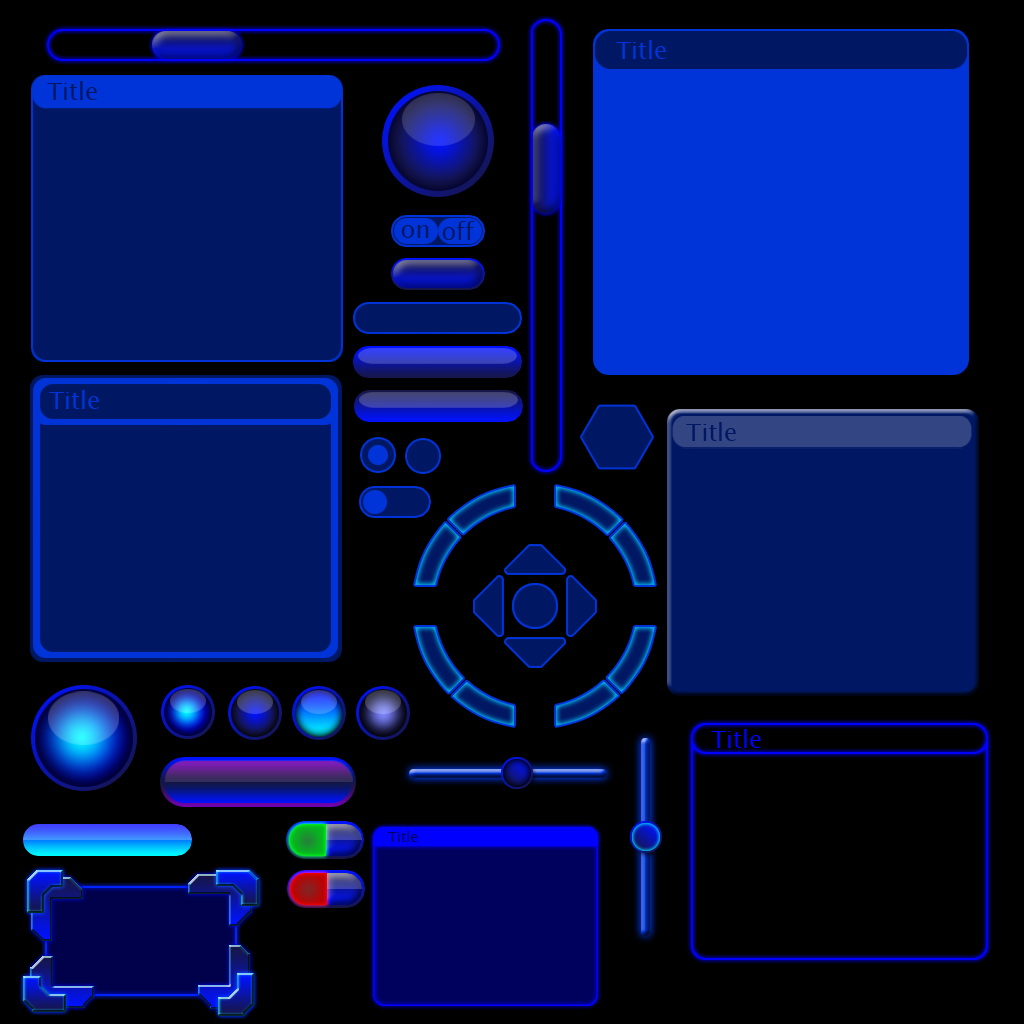
<style>
.page{position:relative;width:1024px;height:1024px;background:#000000}
.page>*{position:absolute;margin:0}
.t1{font:24px "LucidaSansUnicode";color:#0034d8}
.t2{font:24px "LucidaSansUnicode";color:#001864}
.t3{font:24px "LucidaSansUnicode";color:#0000ff}
.t4{font:14px "LucidaSansUnicode";color:#00005d}
</style>
<div class="page">
<p class="t1" style="left:616px;top:40px;width:50px;height:19px">Title</p>
<p class="t2" style="left:47px;top:81px;width:50px;height:19px">Title</p>
<p class="t2" style="left:442px;top:221px;width:33px;height:19px">off</p>
<p class="t2" style="left:401px;top:225px;width:28px;height:13px">on</p>
<p class="t1" style="left:49px;top:390px;width:50px;height:19px">Title</p>
<p class="t2" style="left:686px;top:422px;width:50px;height:19px">Title</p>
<p class="t3" style="left:711px;top:729px;width:50px;height:19px">Title</p>
<p class="t4" style="left:388px;top:831px;width:30px;height:11px">Title</p>
</div>
